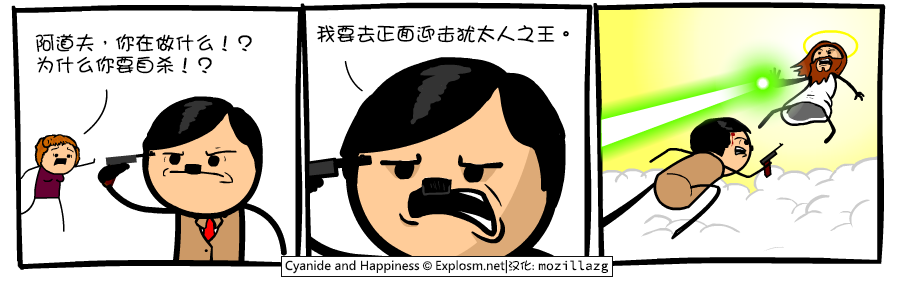
<style>
.page{position:relative;width:900px;height:300px;background:#ffffff}
.page>*{position:absolute;margin:0}
.t1{font:20px "DFGirl";color:#000000}
.t2{font:20px/22px "DFGirl";color:#000000}
</style>
<div class="page">
<p class="t1" style="left:316px;top:25px;width:253px;height:18px">我要去正面迎击犹太人之王。</p>
<p class="t2" style="left:35px;top:33px;width:217px;height:41px">阿道夫，你在做什么！？<br>为什么你要自杀！？</p>
</div>
